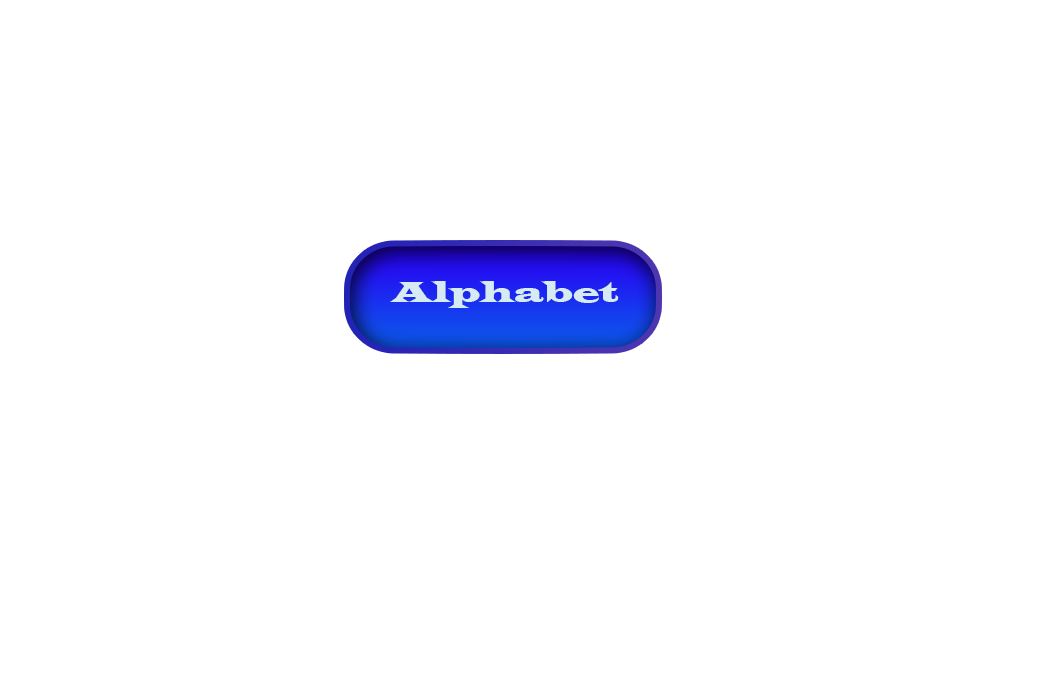
<style>
.page{position:relative;width:1063px;height:680px;background:#ffffff}
.page>*{position:absolute;margin:0}
.t1{font:30px "LatinWide";color:#d6eaf2}
</style>
<div class="page">
<p class="t1" style="left:390px;top:281px;width:229px;height:27px">Alphabet</p>
</div>
